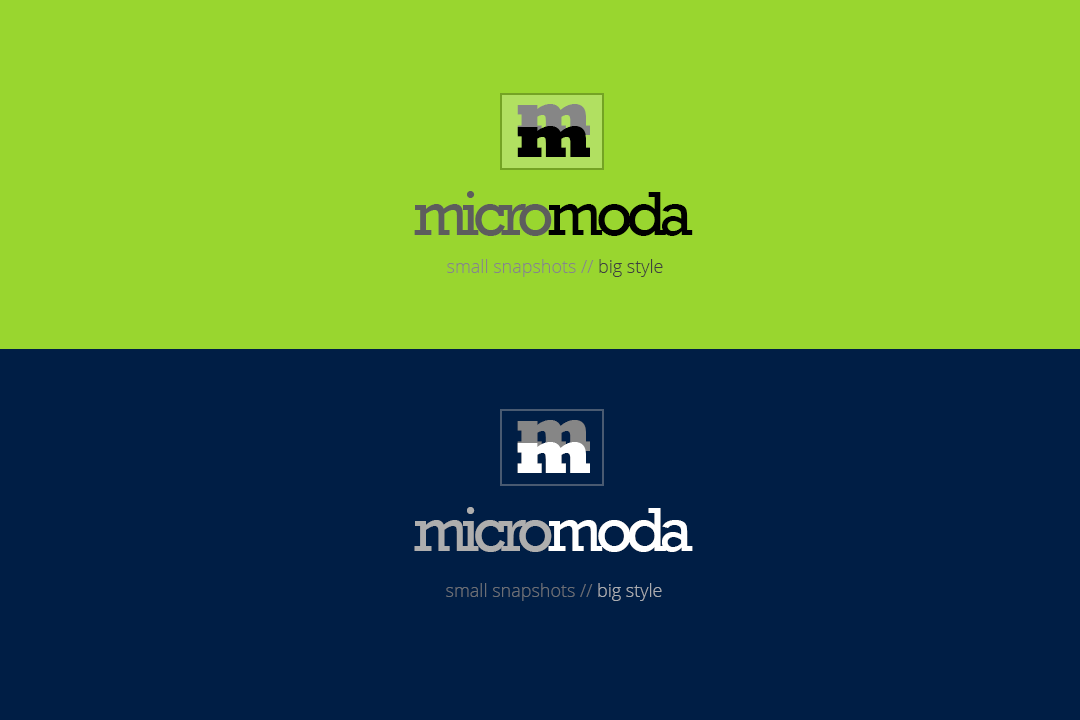
<style>
.page{position:relative;width:1080px;height:720px;background:#001e45}
.page>*{position:absolute;margin:0}
.t1{font:64px/21.6px "Rockwell-ExtraBold";letter-spacing:-0.105em;color:#868686}
.t2{font:64px/21.6px "Rockwell-ExtraBold";letter-spacing:-0.105em;color:#000000}
.t3{font:64px "Rockwell";letter-spacing:-0.105em;color:#5d5d5d}
.t4{font:64px "Rockwell";letter-spacing:-0.105em;color:#000000}
.t5{font:18px "OpenSans-Light";color:#868686}
.t6{font:18px "OpenSans-Light";color:#3f3f3f}
.t7{font:64px/21.6px "Rockwell-ExtraBold";letter-spacing:-0.105em;color:#ffffff}
.t8{font:64px "Rockwell";letter-spacing:-0.105em;color:#aeaeae}
.t9{font:64px "Rockwell";letter-spacing:-0.105em;color:#ffffff}
.t10{font:18px "OpenSans-Light"}
</style>
<div class="page">
<p class="t1" style="left:517px;top:104px;width:73px;height:53px;text-align:center">m<br><span class="t2">m</span></p>
<p class="t3" style="left:414px;top:191px;width:279px;height:45px">micro<span class="t4">moda</span></p>
<p class="t5" style="left:447px;top:259px;width:216px;height:18px">small snapshots // <span class="t6">big style</span></p>
<p class="t1" style="left:517px;top:420px;width:73px;height:53px;text-align:center">m<br><span class="t7">m</span></p>
<p class="t8" style="left:414px;top:507px;width:279px;height:45px">micro<span class="t9">moda</span></p>
<p class="t10" style="left:446px;top:583px;width:216px;height:18px">small snapshots // big style</p>
</div>
